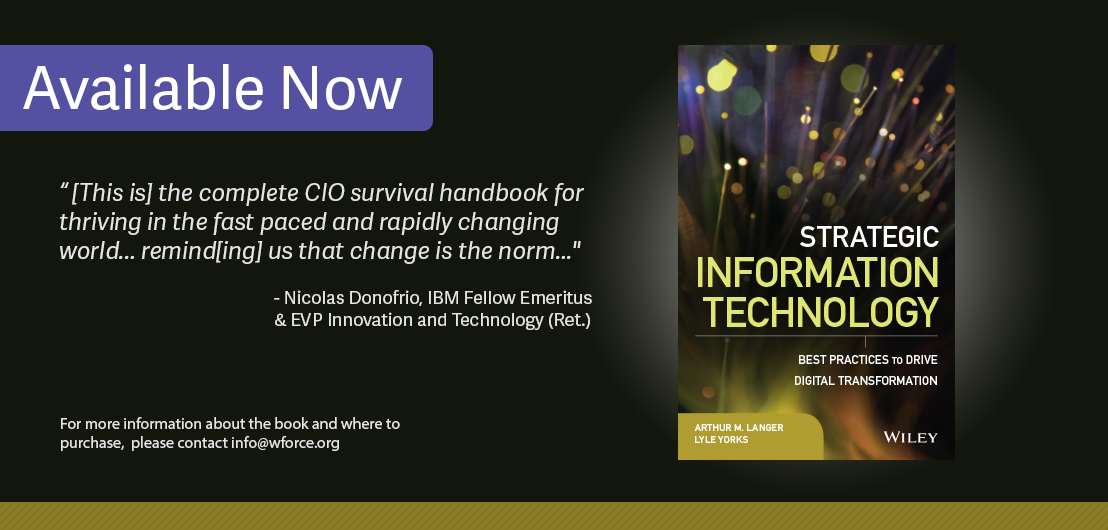
<style>
.page{position:relative;width:1108px;height:530px;background:#13160c}
.page>*{position:absolute;margin:0}
.t1{font:60px "AdelleSans-Regular";color:#ffffff}
.t2{font:24px "AdelleSans-Italic";color:#e5e5e5}
.t3{font:18px "AdelleSans-Regular";color:#e5e5e5}
.t4{font:16px "MyriadPro-Regular";color:#e5e5e5}
</style>
<div class="page">
<p class="t1" style="left:23px;top:64px;width:380px;height:46px">Available Now</p>
<p class="t2" style="left:60px;top:182px;width:524px;height:82px">“ [This is] the complete CIO survival handbook for <br>thriving in the fast paced and rapidly changing <br>world... remind[ing] us that change is the norm..."</p>
<p class="t3" style="left:274px;top:290px;width:318px;height:40px">- Nicolas Donofrio, IBM Fellow Emeritus <br>&amp; EVP Innovation and Technology (Ret.)</p>
<p class="t4" style="left:61px;top:417px;width:339px;height:34px">For more information about the book and where to <br>purchase,  please contact info@wforce.org</p>
</div>
